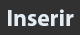
<style>
.page{position:relative;width:80px;height:35px;background:#313131}
.page>*{position:absolute;margin:0}
.t1{font:23.5px "MyriadPro-Bold";color:#e3ecf3}
</style>
<div class="page">
<p class="t1" style="left:8px;top:9px;width:66px;height:17px">Inserir</p>
</div>
